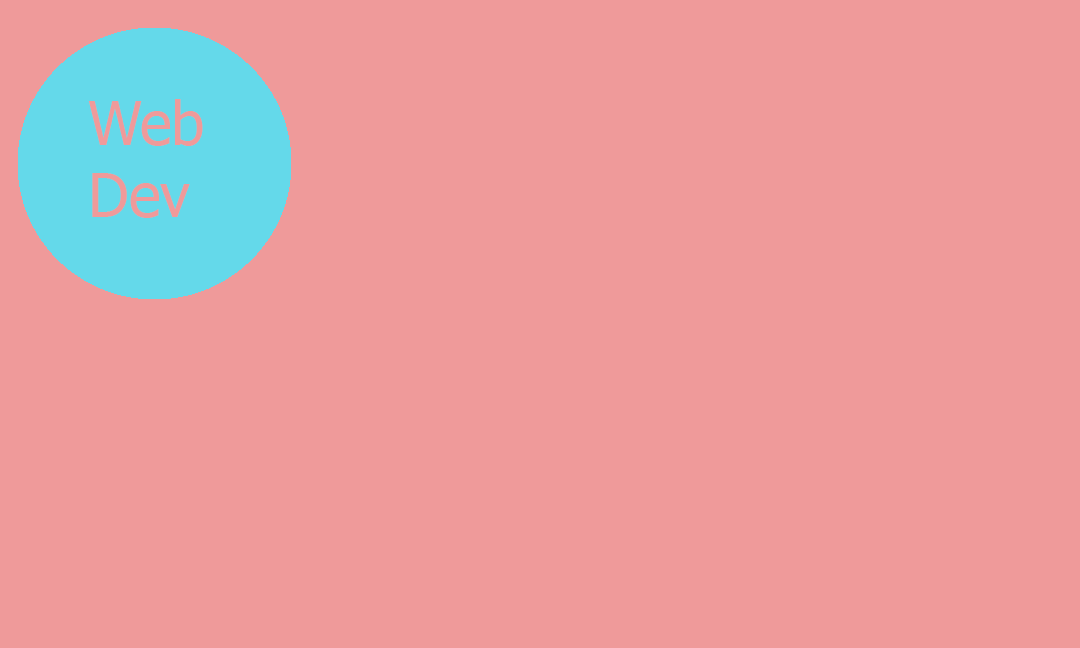
<style>
.page{position:relative;width:1080px;height:648px;background:#ef9a9a}
.page>*{position:absolute;margin:0}
.t1{font:60px "Tahoma";color:#ef9a9a}
</style>
<div class="page">
<p class="t1" style="left:88px;top:99px;width:115px;height:119px">Web<br>Dev</p>
</div>
